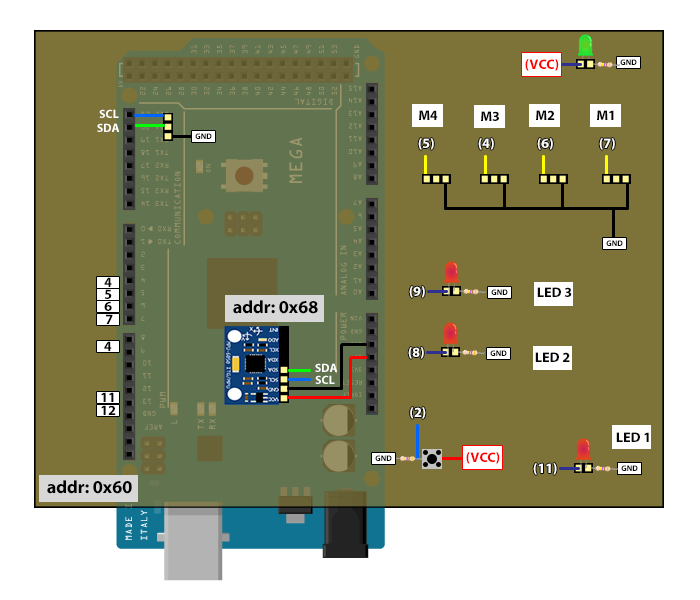
<style>
.page{position:relative;width:700px;height:600px;background:#7d7339}
.page>*{position:absolute;margin:0}
.t1{font:12px "MyriadPro-Bold";color:#ffffff}
.t2{font:14px "MyriadPro-Bold";color:#040404}
.t3{font:14px "MyriadPro-Bold";color:#ffffff}
.t4{font:14px "MyriadPro-Bold";color:#050505}
.t5{font:14px "MyriadPro-Bold";color:#000000}
.t6{font:18px "MyriadPro-Bold";color:#000000}
</style>
<div class="page">
<p class="t1" style="left:99px;top:109px;width:20px;height:9px">SCL</p>
<p class="t2" style="left:419px;top:110px;width:19px;height:10px">M4</p>
<p class="t2" style="left:481px;top:111px;width:18px;height:10px">M3</p>
<p class="t2" style="left:536px;top:110px;width:19px;height:10px">M2</p>
<p class="t2" style="left:597px;top:110px;width:17px;height:10px">M1</p>
<p class="t1" style="left:97px;top:123px;width:23px;height:9px">SDA</p>
<p class="t3" style="left:418px;top:138px;width:16px;height:12px">(5)</p>
<p class="t3" style="left:478px;top:138px;width:16px;height:12px">(4)</p>
<p class="t3" style="left:537px;top:138px;width:16px;height:12px">(6)</p>
<p class="t3" style="left:599px;top:138px;width:16px;height:12px">(7)</p>
<p class="t4" style="left:104px;top:277px;width:8px;height:10px">4</p>
<p class="t5" style="left:104px;top:289px;width:8px;height:10px">5</p>
<p class="t3" style="left:409px;top:286px;width:16px;height:12px">(9)</p>
<p class="t2" style="left:537px;top:287px;width:35px;height:10px">LED 3</p>
<p class="t5" style="left:104px;top:301px;width:8px;height:10px">6</p>
<p class="t6" style="left:233px;top:300px;width:85px;height:14px">addr: 0x68</p>
<p class="t5" style="left:106px;top:314px;width:7px;height:10px">7</p>
<p class="t5" style="left:104px;top:341px;width:8px;height:10px">4</p>
<p class="t3" style="left:408px;top:347px;width:16px;height:12px">(8)</p>
<p class="t2" style="left:535px;top:352px;width:35px;height:10px">LED 2</p>
<p class="t1" style="left:315px;top:363px;width:23px;height:9px">SDA</p>
<p class="t1" style="left:315px;top:375px;width:20px;height:9px">SCL</p>
<p class="t5" style="left:101px;top:392px;width:13px;height:10px">11</p>
<p class="t5" style="left:101px;top:405px;width:15px;height:10px">12</p>
<p class="t3" style="left:410px;top:407px;width:16px;height:12px">(2)</p>
<p class="t2" style="left:616px;top:432px;width:33px;height:10px">LED 1</p>
<p class="t3" style="left:533px;top:463px;width:24px;height:12px">(11)</p>
<p class="t6" style="left:47px;top:480px;width:85px;height:14px">addr: 0x60</p>
</div>
